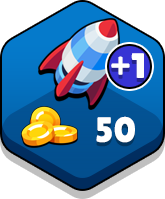
<style>
.page{position:relative;width:165px;height:199px;background:#ffffff}
.page>*{position:absolute;margin:0}
.t1{font:35.5px "LilitaOne";color:#ffffff}
</style>
<div class="page">
<p class="t1" style="left:111px;top:53px;width:33px;height:25px">+1</p>
<p class="t1" style="left:96px;top:116px;width:39px;height:27px">50</p>
</div>
